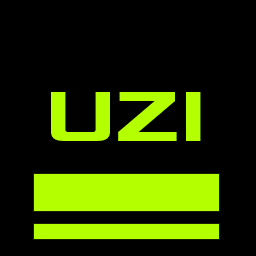
<style>
.page{position:relative;width:256px;height:256px;background:#000000}
.page>*{position:absolute;margin:0}
.t1{font:72px "Xolonium-Bold";color:#b4ff00;font-weight:bold}
</style>
<div class="page">
<p class="t1" style="left:51px;top:92px;width:150px;height:49px">UZI</p>
</div>
